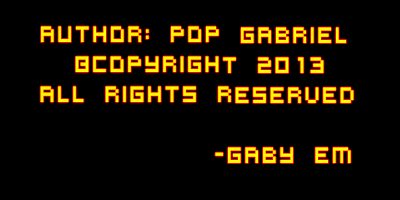
<style>
.page{position:relative;width:400px;height:200px;background:#000000}
.page>*{position:absolute;margin:0}
.t1{font:25px "VirtualDJ";color:#fcff00;scale:0.8 1}
</style>
<div class="page">
<p class="t1" style="left:40px;top:26px;width:314px;height:137px">Author: Pop Gabriel<br>    ©CopyrighT 2013<br>  All rights reserved<br><br>            -Gaby Em</p>
</div>
